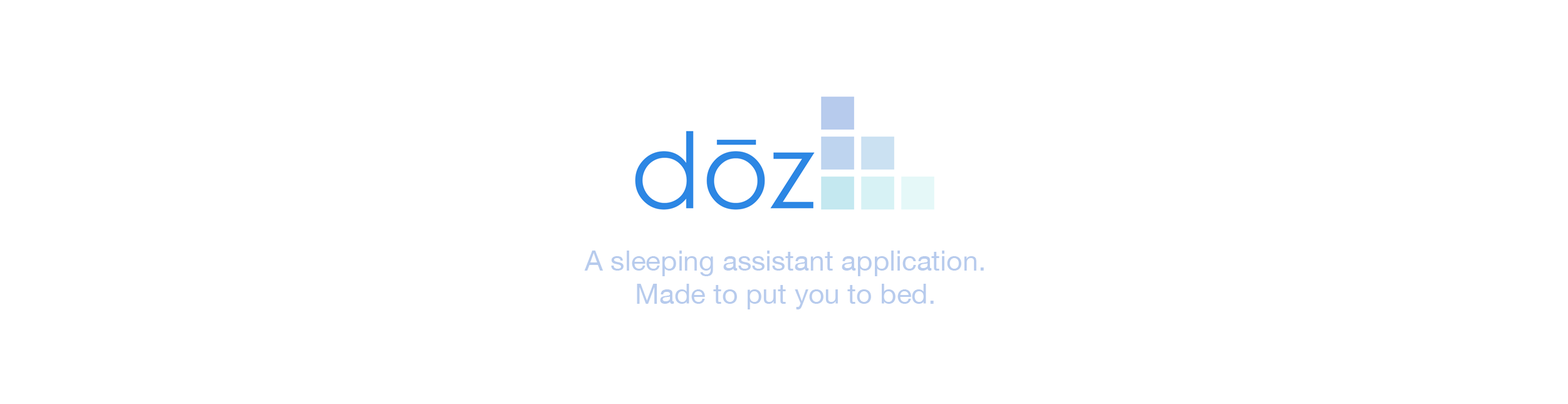
<style>
.page{position:relative;width:1568px;height:404px;background:#ffffff}
.page>*{position:absolute;margin:0}
.t1{font:27.9px "HelveticaNeue";color:#b7cbed}
</style>
<div class="page">
<p class="t1" style="left:584px;top:251px;width:400px;height:59px;text-align:center">A sleeping assistant application.<br>Made to put you to bed.</p>
</div>
